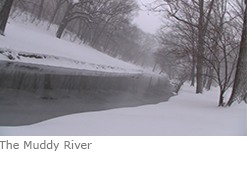
<style>
.page{position:relative;width:247px;height:169px}
.page>*{position:absolute;margin:0}
.t1{font:11px "Verdana";color:#7c7c7c}
</style>
<div class="page">
<p class="t1" style="left:0px;top:140px;width:92px;height:11px">The Muddy River</p>
</div>
